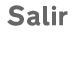
<style>
.page{position:relative;width:75px;height:70px;background:#ffffff}
.page>*{position:absolute;margin:0}
.t1{font:26px "Transport-Heavy-Regular";color:#666666}
</style>
<div class="page">
<p class="t1" style="left:7px;top:5px;width:61px;height:21px">Salir</p>
</div>
